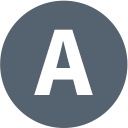
<style>
.page{position:relative;width:128px;height:128px;background:#556270}
.page>*{position:absolute;margin:0}
.t1{font:100px "SourceSansPro-Bold";color:#ffffff}
</style>
<div class="page">
<p class="t1" style="left:34px;top:29px;width:59px;height:66px">A</p>
</div>
